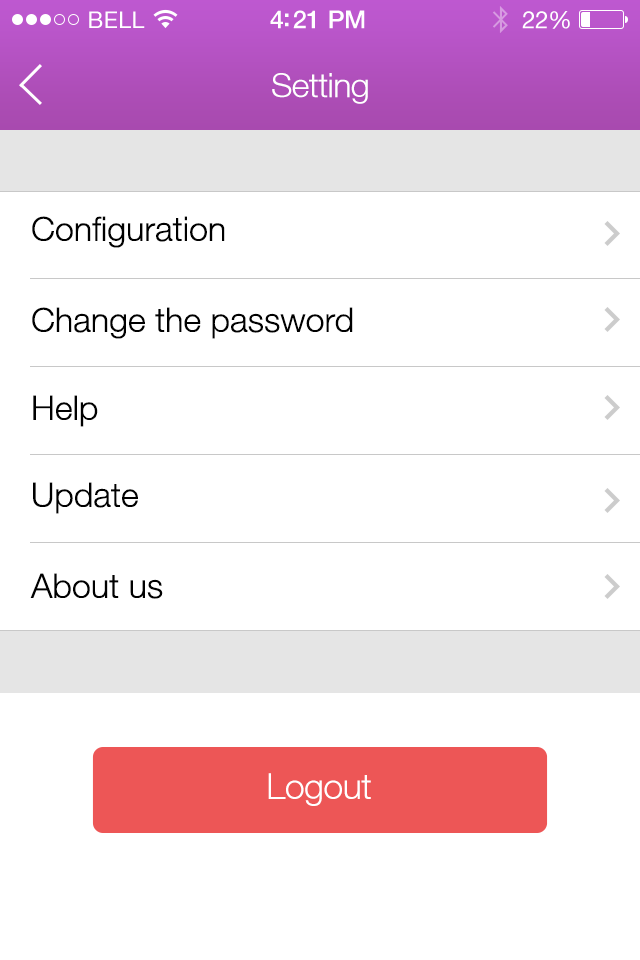
<style>
.page{position:relative;width:640px;height:960px;background:#ffffff}
.page>*{position:absolute;margin:0}
.t1{font:34px "HelveticaNeueLT-Light";letter-spacing:-0.02em;color:#ffffff}
.t2{font:34px "HelveticaNeueLT-Light";color:#000000}
.t3{font:36px "HelveticaNeueLT-Light";letter-spacing:-0.02em;color:#ffffff}
</style>
<div class="page">
<p class="t1" style="left:272px;top:73px;width:96px;height:31px">Setting</p>
<p class="t2" style="left:32px;top:216px;width:193px;height:32px">Configuration</p>
<p class="t2" style="left:32px;top:307px;width:321px;height:32px">Change the password</p>
<p class="t2" style="left:33px;top:395px;width:65px;height:32px">Help</p>
<p class="t2" style="left:33px;top:482px;width:105px;height:32px">Update</p>
<p class="t2" style="left:30px;top:573px;width:133px;height:26px">About us</p>
<p class="t3" style="left:268px;top:773px;width:103px;height:33px">Logout</p>
</div>
